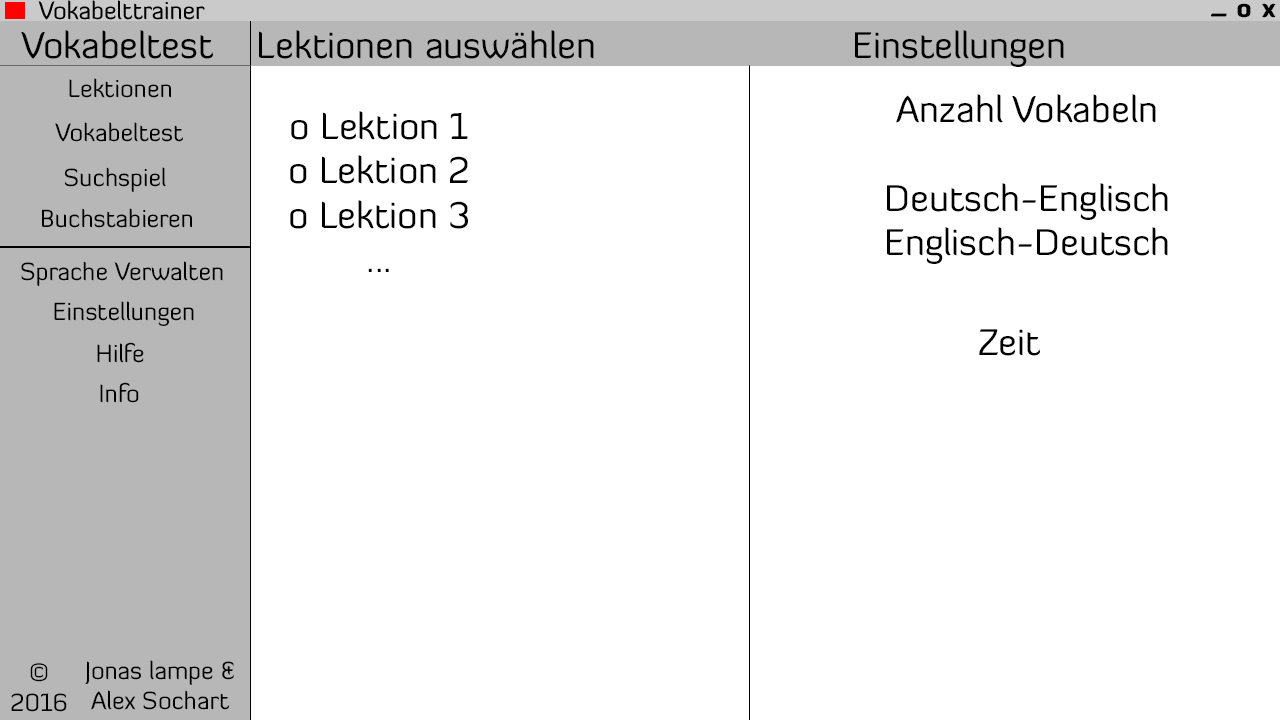
<style>
.page{position:relative;width:1280px;height:720px;background:#ffffff}
.page>*{position:absolute;margin:0}
.t1{font:24.6px "DiavloBlack-Regular";color:#000000}
.t2{font:36.9px "DiavloBook-Regular";color:#000000}
.t3{font:24.6px "DiavloBook-Regular";color:#000000}
</style>
<div class="page">
<p class="t1" style="left:1237px;top:3px;width:14px;height:15px">o</p>
<p class="t1" style="left:1262px;top:3px;width:14px;height:15px">x</p>
<p class="t1" style="left:1211px;top:13px;width:16px;height:4px">_</p>
<p class="t2" style="left:21px;top:30px;width:192px;height:29px">Vokabeltest</p>
<p class="t2" style="left:259px;top:30px;width:335px;height:29px">Lektionen auswählen</p>
<p class="t2" style="left:855px;top:30px;width:209px;height:37px">Einstellungen</p>
<p class="t3" style="left:69px;top:78px;width:102px;height:20px">Lektionen</p>
<p class="t2" style="left:887px;top:94px;width:281px;height:170px;text-align:center">Anzahl Vokabeln<br><br>Deutsch-Englisch<br>Englisch-Deutsch</p>
<p class="t2" style="left:290px;top:111px;width:178px;height:161px;text-align:center">o Lektion 1<br>o Lektion 2<br>o Lektion 3<br>...</p>
<p class="t3" style="left:55px;top:122px;width:128px;height:20px">Vokabeltest</p>
<p class="t3" style="left:65px;top:167px;width:102px;height:25px">Suchspiel</p>
<p class="t3" style="left:42px;top:208px;width:150px;height:20px">Buchstabieren</p>
<p class="t3" style="left:21px;top:261px;width:202px;height:25px">Sprache Verwalten</p>
<p class="t3" style="left:54px;top:301px;width:140px;height:25px">Einstellungen</p>
<p class="t2" style="left:979px;top:329px;width:61px;height:27px">Zeit</p>
<p class="t3" style="left:97px;top:342px;width:47px;height:21px">Hilfe</p>
<p class="t3" style="left:100px;top:382px;width:39px;height:21px">Info</p>
<p class="t3" style="left:11px;top:663px;width:56px;height:49px;text-align:center">©<br>2016</p>
<p class="t3" style="left:85px;top:660px;width:149px;height:50px;text-align:center">Jonas lampe &amp;<br>Alex Sochart</p>
</div>
